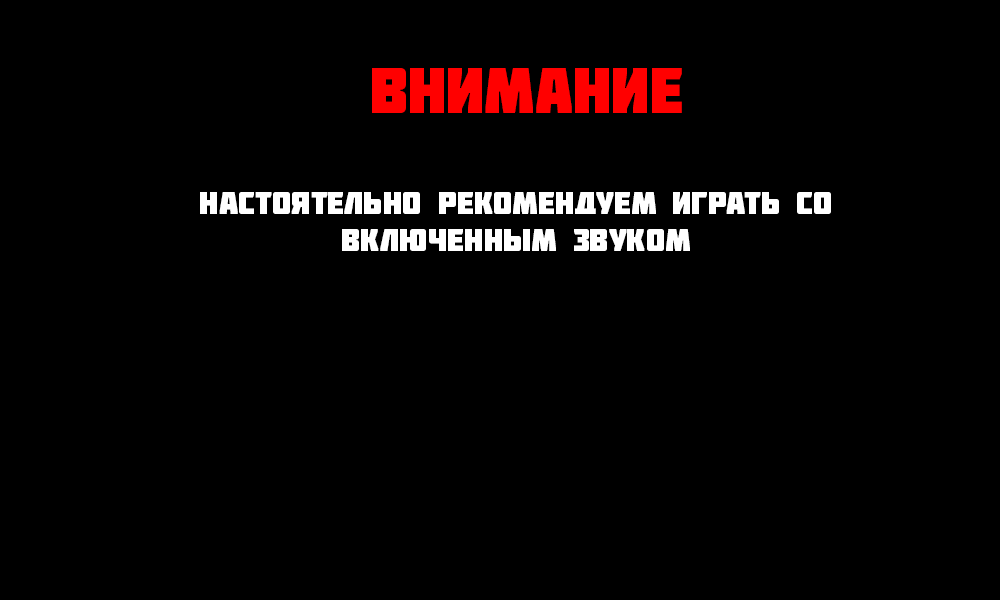
<style>
.page{position:relative;width:1000px;height:600px;background:#000000}
.page>*{position:absolute;margin:0}
.t1{font:63.8px "Molot";color:#ff0000}
.t2{font:31.4px "Molot";color:#ffffff}
</style>
<div class="page">
<p class="t1" style="left:372px;top:68px;width:310px;height:45px">внимание</p>
<p class="t2" style="left:200px;top:192px;width:631px;height:59px;text-align:center">Настоятельно рекомендуем играть со<br>включенным звуком</p>
</div>
